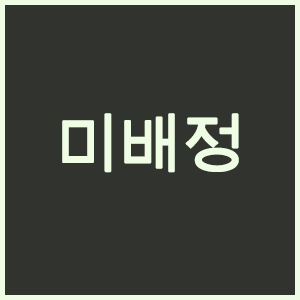
<style>
.page{position:relative;width:300px;height:300px;background:#30332e}
.page>*{position:absolute;margin:0}
.t1{font:62.5px "ArialUnicodeMS";color:#f0fde5;font-weight:bold}
</style>
<div class="page">
<p class="t1" style="left:62px;top:113px;width:177px;height:60px">미배정</p>
</div>
